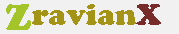
<style>
.page{position:relative;width:179px;height:34px;background:#f1f1f1}
.page>*{position:absolute;margin:0}
.t1{font:36px "CooperBlackStd";color:#a4c529}
.t2{font:30px "CooperBlackStd";color:#a39418}
.t3{font:30px "CooperBlackStd";color:#772b2b}
</style>
<div class="page">
<p class="t1" style="left:6px;top:4px;width:25px;height:26px">Z</p>
<p class="t2" style="left:32px;top:4px;width:129px;height:21px">ravian<span class="t3">X</span></p>
</div>
